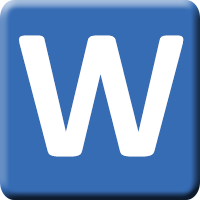
<style>
.page{position:relative;width:200px;height:200px;background:#366cb4}
.page>*{position:absolute;margin:0}
.t1{font:190px "Calibri-Bold";color:#ffffff}
</style>
<div class="page">
<p class="t1" style="left:19px;top:35px;width:165px;height:122px">W</p>
</div>
